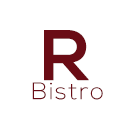
<style>
.page{position:relative;width:128px;height:128px;background:#ffffff}
.page>*{position:absolute;margin:0}
.t1{font:72px "Nexa-Bold";letter-spacing:0.06em;color:#6a0c15}
.t2{font:24px "Nexa-Light";letter-spacing:0.06em;color:#6a0c15}
</style>
<div class="page">
<p class="t1" style="left:44px;top:30px;width:45px;height:51px">R</p>
<p class="t2" style="left:32px;top:82px;width:71px;height:18px">Bistro</p>
</div>
